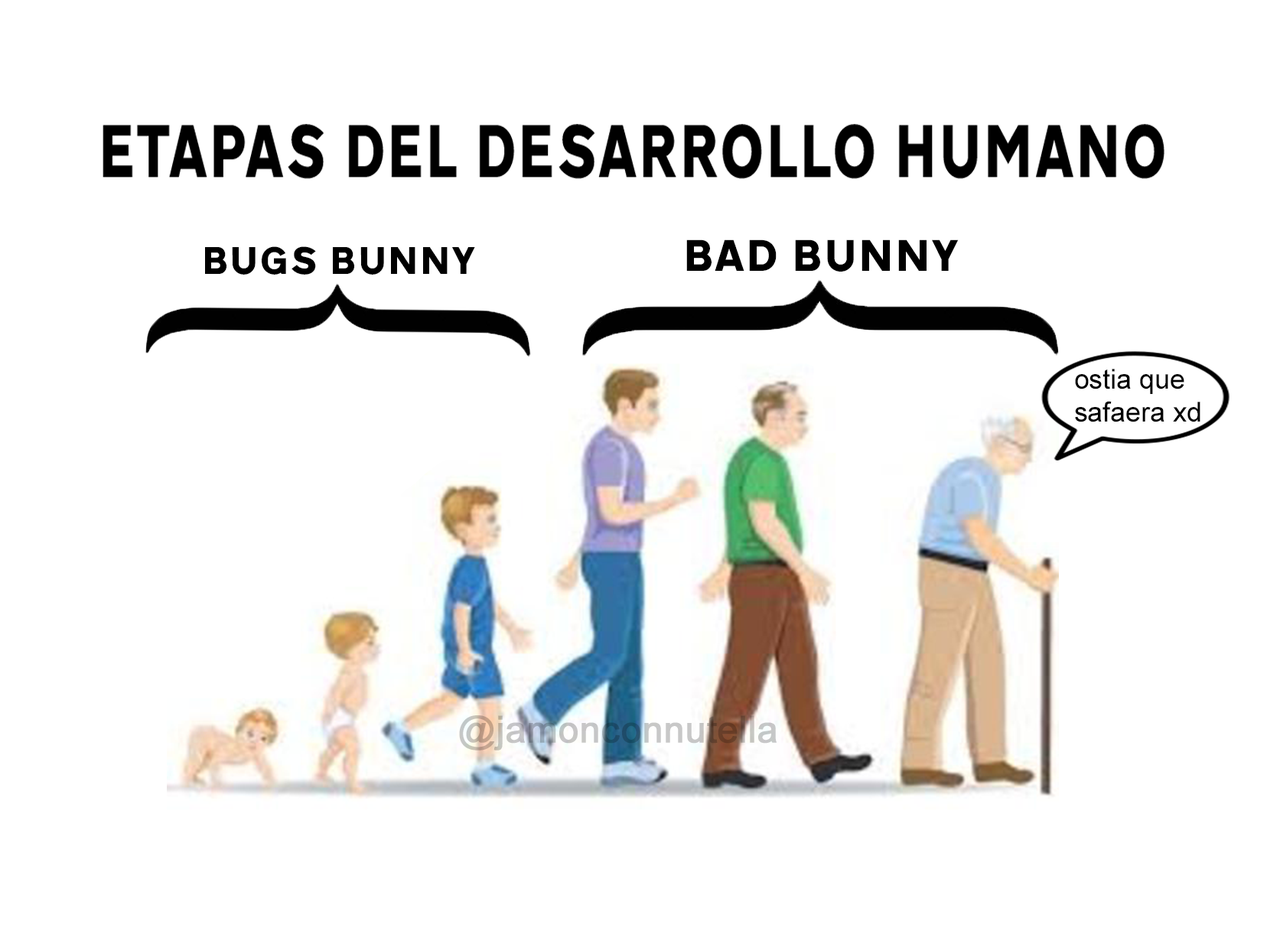
<style>
.page{position:relative;width:1267px;height:941px;background:#ffffff}
.page>*{position:absolute;margin:0}
.t1{font:46.1px "TrafficTypeW01-SpainD";color:#000000}
.t2{font:40.2px "TrafficTypeW01-SpainD";color:#000000}
.t3{font:27.4px "ArialMT";color:#000000}
</style>
<div class="page">
<p class="t1" style="left:686px;top:239px;width:273px;height:33px">BAD BUNNY</p>
<p class="t2" style="left:205px;top:246px;width:270px;height:29px">BUGS BUNNY</p>
<p class="t3" style="left:1075px;top:369px;width:125px;height:53px">ostia que<br>safaera xd</p>
</div>
